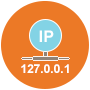
<style>
.page{position:relative;width:90px;height:90px;background:#ec7926}
.page>*{position:absolute;margin:0}
.t1{font:16px "Arial-BoldMT";color:#ffffff}
.t2{font:12px "Arial-BoldMT";color:#ffffff}
</style>
<div class="page">
<p class="t1" style="left:39px;top:30px;width:15px;height:12px">IP</p>
<p class="t2" style="left:21px;top:64px;width:48px;height:9px">127.0.0.1</p>
</div>
